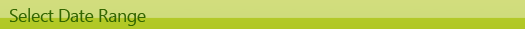
<style>
.page{position:relative;width:525px;height:29px}
.page>*{position:absolute;margin:0}
.t1{font:18px "SegoeUI";letter-spacing:-0.025em;color:#336600}
</style>
<div class="page">
<p class="t1" style="left:9px;top:8px;width:137px;height:18px">Select Date Range</p>
</div>
